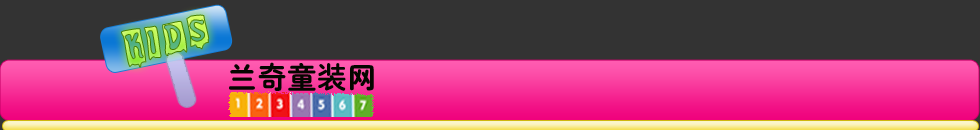
<style>
.page{position:relative;width:980px;height:130px;background:#333333}
.page>*{position:absolute;margin:0}
.t1{font:41px "BeatMyGuest"}
.t2{font:30px "ç»å¸ç²åç®-regular";color:#050600}
</style>
<div class="page">
<p class="t1" style="left:121px;top:14px;width:89px;height:54px;rotate:-11deg">KIDS</p>
<p class="t2" style="left:229px;top:62px;width:145px;height:29px">兰奇童装网</p>
</div>
